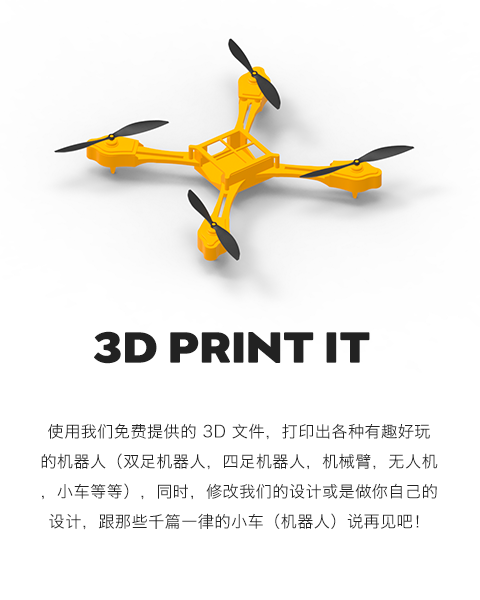
<style>
.page{position:relative;width:480px;height:600px;background:#ffffff}
.page>*{position:absolute;margin:0}
.t1{font:50px "Migrena_Grotesque-Bold";letter-spacing:0.02em;color:#222222}
.t2{font:16.2px/30px "HiraginoSansGB-W3";letter-spacing:0.02em;color:#222222}
</style>
<div class="page">
<p class="t1" style="left:94px;top:331px;width:276px;height:33px">3D PRINT IT</p>
<p class="t2" style="left:41px;top:423px;width:397px;height:107px;text-align:center">使用我们免费提供的 3D 文件，打印出各种有趣好玩的机器人（双足机器人，四足机器人，机械臂，无人机，小车等等），同时，修改我们的设计或是做你自己的设计，跟那些千篇一律的小车（机器人）说再见吧！</p>
</div>
